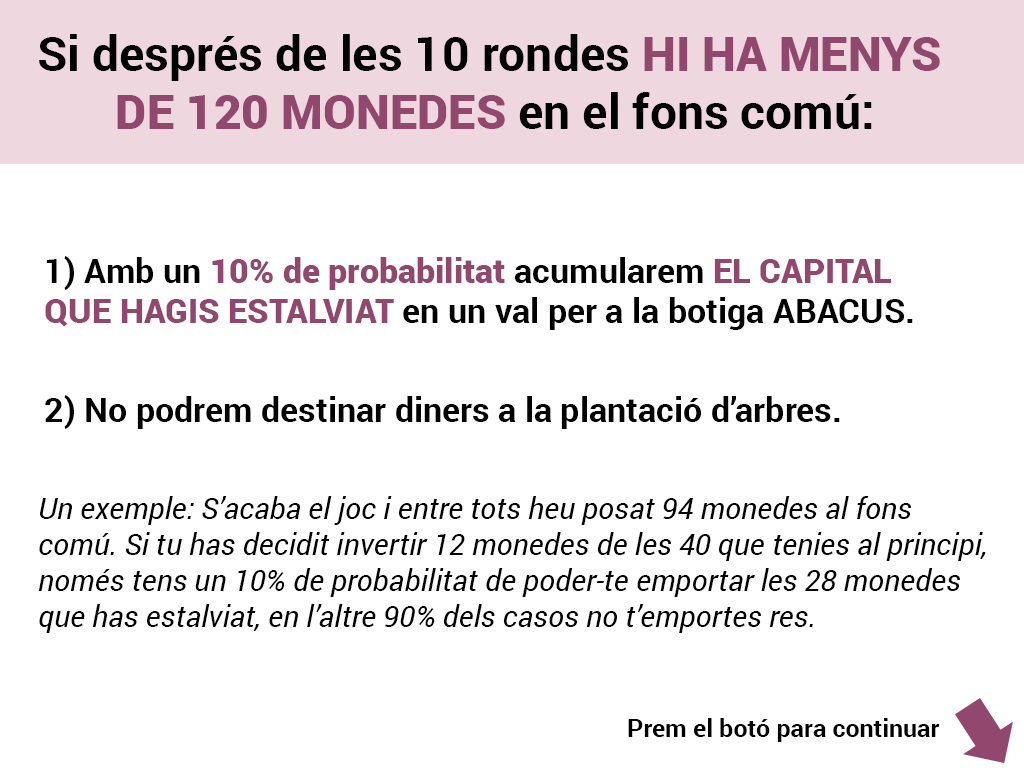
<style>
.page{position:relative;width:1024px;height:768px;background:#ffffff}
.page>*{position:absolute;margin:0}
.t1{font:48px "Roboto-Bold";color:#000000}
.t2{font:48px "Roboto-Black";color:#92476e}
.t3{font:34px "Roboto-Bold";color:#000000}
.t4{font:34px "Roboto-Black";color:#92476e}
.t5{font:30px "Roboto-Italic";color:#000000}
.t6{font:25px "Roboto-Bold";color:#000000}
</style>
<div class="page">
<p class="t1" style="left:39px;top:34px;width:901px;height:95px;text-align:center">Si després de les 10 rondes <span class="t2">HI HA MENYS <br>DE 120 MONEDES </span>en el fons comú:</p>
<p class="t3" style="left:45px;top:256px;width:868px;height:173px">1) Amb un <span class="t4">10% de probabilitat </span>acumularem <span class="t4">EL CAPITAL <br>QUE HAGIS ESTALVIAT </span>en un val per a la botiga ABACUS.<br><br><br>2) No podrem destinar diners a la plantació d’arbres.</p>
<p class="t5" style="left:38px;top:496px;width:948px;height:137px">Un exemple: S’acaba el joc i entre tots heu posat 94 monedes al fons <br>comú. Si tu has decidit invertir 12 monedes de les 40 que tenies al principi,<br>només tens un 10% de probabilitat de poder-te emportar les 28 monedes <br>que has estalviat, en l’altre 90% dels casos no t’emportes res.</p>
<p class="t6" style="left:628px;top:718px;width:312px;height:24px">Prem el botó para continuar</p>
</div>
